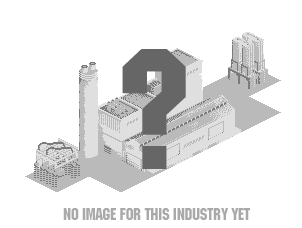
<style>
.page{position:relative;width:302px;height:228px;background:#ffffff}
.page>*{position:absolute;margin:0}
.t1{font:180px "MachineITCTT";letter-spacing:-0.01em;color:#666666}
.t2{font:18px "MachineITCTT";letter-spacing:-0.01em;color:#a9a9a9}
</style>
<div class="page">
<p class="t1" style="left:122px;top:49px;width:64px;height:120px">?</p>
<p class="t2" style="left:63px;top:208px;width:187px;height:12px">NO IMAGE FOR THIS INDUSTRY YET</p>
</div>
